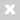
<style>
.page{position:relative;width:20px;height:20px;background:#cccccc}
.page>*{position:absolute;margin:0}
.t1{font:18px "Arial-Black";color:#ffffff}
</style>
<div class="page">
<p class="t1" style="left:4px;top:4px;width:12px;height:10px">x</p>
</div>
